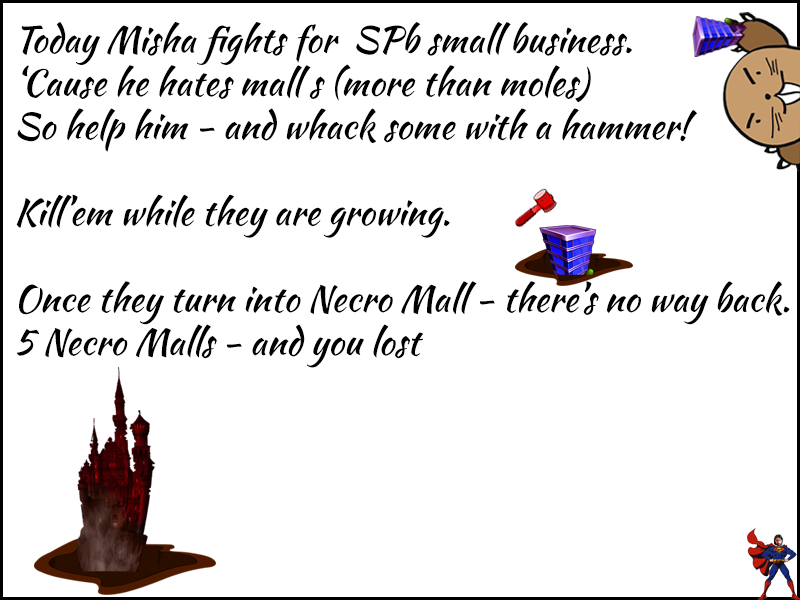
<style>
.page{position:relative;width:800px;height:600px;background:#ffffff}
.page>*{position:absolute;margin:0}
.t1{font:36px "KaushanScript-Regular";color:#000000}
</style>
<div class="page">
<p class="t1" style="left:16px;top:22px;width:774px;height:346px">Today Misha fights for  SPb small business.<br>‘Cause he hates mall s (more than moles)<br>So help him - and whack some with a hammer!<br><br>Kill’em while they are growing.<br><br>Once they turn into Necro Mall - there’s no way back.<br>5 Necro Malls - and you lost</p>
</div>
